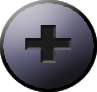
<style>
.page{position:relative;width:97px;height:92px}
.page>*{position:absolute;margin:0}
.t1{font:67px "Arial-Black";letter-spacing:0.05em;color:#1c1c1c;font-weight:bold;scale:1.24 1}
</style>
<div class="page">
<p class="t1" style="left:25px;top:25px;width:47px;height:38px">+</p>
</div>
